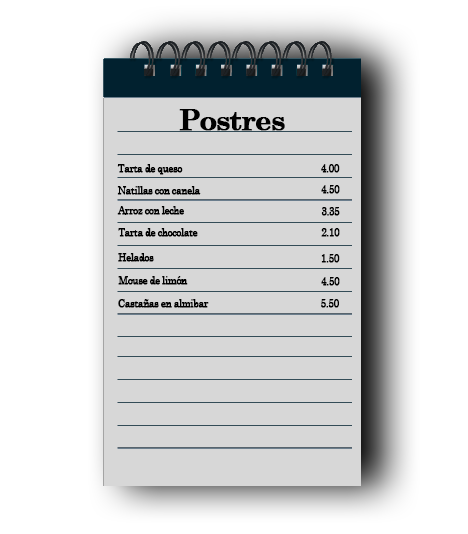
<style>
.page{position:relative;width:468px;height:534px;background:#d7d7d7}
.page>*{position:absolute;margin:0}
.t1{font:29px "CenturySchoolbook-Bold";letter-spacing:-0.06em;color:#000000;font-weight:bold}
.t2{font:10px "CenturySchoolbook";letter-spacing:-0.06em;color:#000000;font-weight:bold}
</style>
<div class="page">
<p class="t1" style="left:179px;top:109px;width:106px;height:22px">Postres</p>
<p class="t2" style="left:117px;top:164px;width:66px;height:11px">Tarta de queso</p>
<p class="t2" style="left:321px;top:164px;width:19px;height:9px">4.00</p>
<p class="t2" style="left:321px;top:185px;width:19px;height:9px">4.50</p>
<p class="t2" style="left:117px;top:186px;width:84px;height:9px">Natillas con canela</p>
<p class="t2" style="left:117px;top:206px;width:67px;height:9px">Arroz con leche</p>
<p class="t2" style="left:321px;top:207px;width:19px;height:9px">3.35</p>
<p class="t2" style="left:118px;top:228px;width:80px;height:9px">Tarta de chocolate</p>
<p class="t2" style="left:321px;top:228px;width:19px;height:9px">2.10</p>
<p class="t2" style="left:118px;top:253px;width:36px;height:9px">Helados</p>
<p class="t2" style="left:321px;top:254px;width:19px;height:9px">1.50</p>
<p class="t2" style="left:118px;top:276px;width:70px;height:9px">Mouse de limón</p>
<p class="t2" style="left:321px;top:277px;width:19px;height:9px">4.50</p>
<p class="t2" style="left:118px;top:299px;width:91px;height:9px">Castañas en almibar</p>
<p class="t2" style="left:321px;top:299px;width:18px;height:9px">5.50</p>
</div>
